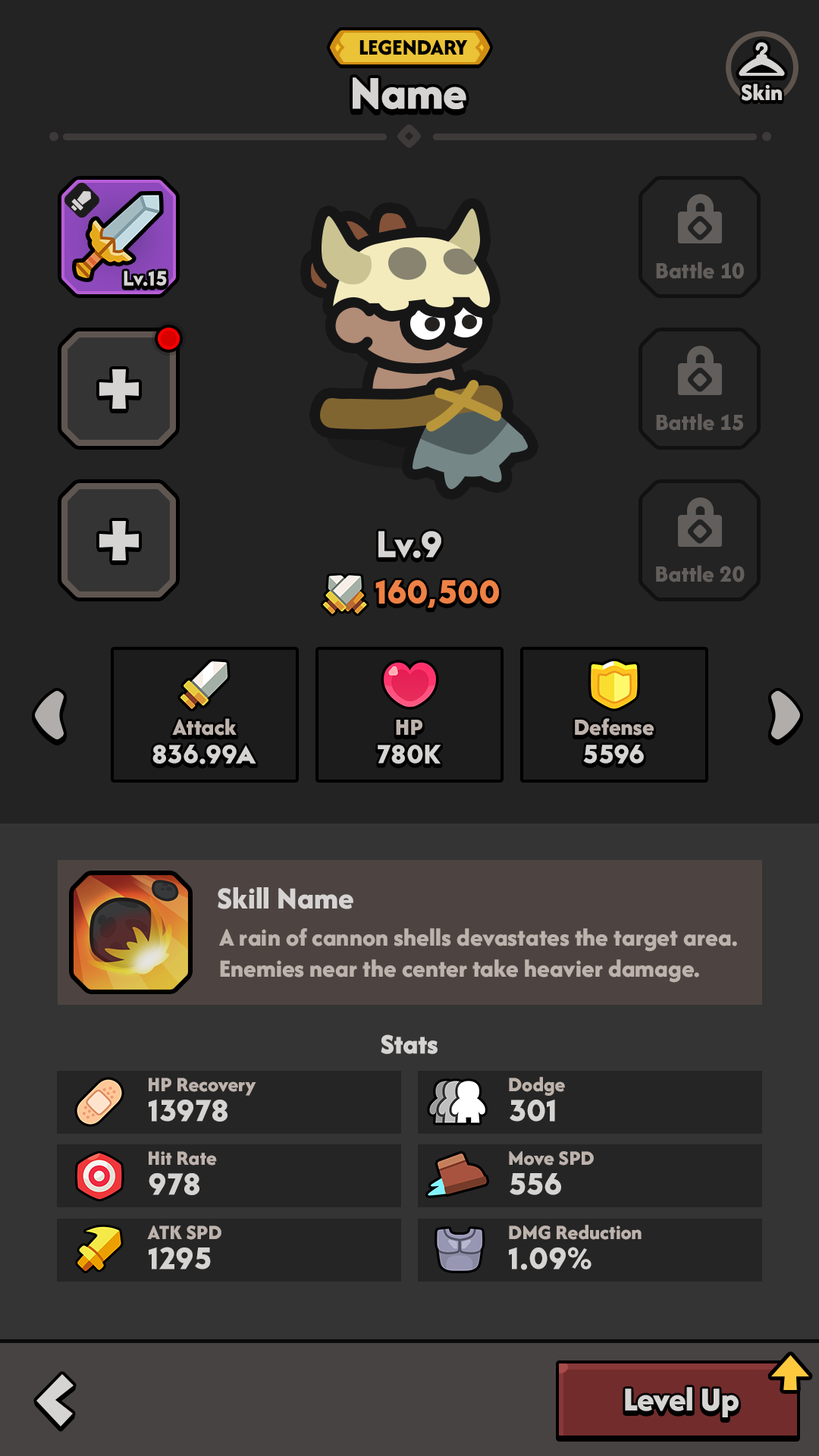
<style>
.page{position:relative;width:819px;height:1456px;background:#232323}
.page>*{position:absolute;margin:0}
.t1{font:22.9px "AfacadFlux-ExtraBold";letter-spacing:-0.02em;color:#000000;text-transform:uppercase}
.t2{font:48.5px "AfacadFlux-ExtraBold";color:#d6d4d3}
.t3{font:24.3px "AfacadFlux-ExtraBold";color:#d6d4d3}
.t4{font:24.3px "AfacadFlux-ExtraBold";color:#625e5b}
.t5{font:21.2px "LTAvocado-Bold";color:#d6d4d3}
.t6{font:37.9px "LTAvocado-Bold";color:#d6d4d3}
.t7{font:34.1px "LTAvocado-Bold";color:#ee8145}
.t8{font:24.3px "AfacadFlux-ExtraBold";color:#bdb2ac}
.t9{font:27.3px "LTAvocado-Bold";color:#d6d4d3}
.t10{font:31.8px "AfacadFlux-ExtraBold";color:#d6d4d3}
.t11{font:25.8px "AfacadFlux-ExtraBold";color:#bdb2ac}
.t12{font:28.8px "AfacadFlux-ExtraBold";color:#d6d4d3}
.t13{font:21.2px "AfacadFlux-ExtraBold";color:#bdb2ac}
.t14{font:31.8px "LTAvocado-Bold";color:#d6d4d3}
.t15{font:35px "AfacadFlux-ExtraBold";color:#d6d4d3}
</style>
<div class="page">
<p class="t1" style="left:359px;top:39px;width:109px;height:16px">Legendary</p>
<p class="t2" style="left:353px;top:77px;width:113px;height:32px">Name</p>
<p class="t3" style="left:742px;top:83px;width:40px;height:18px">Skin</p>
<p class="t4" style="left:656px;top:262px;width:88px;height:17px">Battle 10</p>
<p class="t5" style="left:124px;top:271px;width:43px;height:15px">Lv.15</p>
<p class="t4" style="left:656px;top:413px;width:87px;height:18px">Battle 15</p>
<p class="t6" style="left:378px;top:531px;width:63px;height:27px">Lv.9</p>
<p class="t4" style="left:656px;top:565px;width:89px;height:17px">Battle 20</p>
<p class="t7" style="left:375px;top:580px;width:124px;height:28px">160,500</p>
<p class="t8" style="left:172px;top:718px;width:65px;height:18px">Attack</p>
<p class="t8" style="left:396px;top:720px;width:26px;height:15px">HP</p>
<p class="t8" style="left:575px;top:718px;width:79px;height:18px">Defense</p>
<p class="t9" style="left:152px;top:745px;width:104px;height:19px">836.99A</p>
<p class="t9" style="left:378px;top:745px;width:63px;height:19px">780K</p>
<p class="t9" style="left:583px;top:745px;width:61px;height:19px">5596</p>
<p class="t10" style="left:218px;top:887px;width:135px;height:22px">Skill Name</p>
<p class="t11" style="left:219px;top:928px;width:518px;height:55px">A rain of cannon shells devastates the target area.<br>Enemies near the center take heavier damage.</p>
<p class="t12" style="left:381px;top:1034px;width:57px;height:20px">Stats</p>
<p class="t13" style="left:149px;top:1078px;width:107px;height:18px">HP Recovery</p>
<p class="t13" style="left:509px;top:1077px;width:56px;height:19px">Dodge</p>
<p class="t14" style="left:149px;top:1100px;width:78px;height:22px">13978</p>
<p class="t14" style="left:510px;top:1100px;width:45px;height:22px">301</p>
<p class="t13" style="left:149px;top:1151px;width:68px;height:15px">Hit Rate</p>
<p class="t13" style="left:509px;top:1151px;width:85px;height:15px">Move SPD</p>
<p class="t14" style="left:149px;top:1173px;width:50px;height:22px">978</p>
<p class="t14" style="left:510px;top:1173px;width:51px;height:22px">556</p>
<p class="t13" style="left:147px;top:1225px;width:74px;height:15px">ATK SPD</p>
<p class="t13" style="left:509px;top:1225px;width:133px;height:15px">DMG Reduction</p>
<p class="t14" style="left:149px;top:1247px;width:62px;height:22px">1295</p>
<p class="t14" style="left:509px;top:1247px;width:82px;height:23px">1.09%</p>
<p class="t15" style="left:625px;top:1387px;width:114px;height:30px">Level Up</p>
</div>
